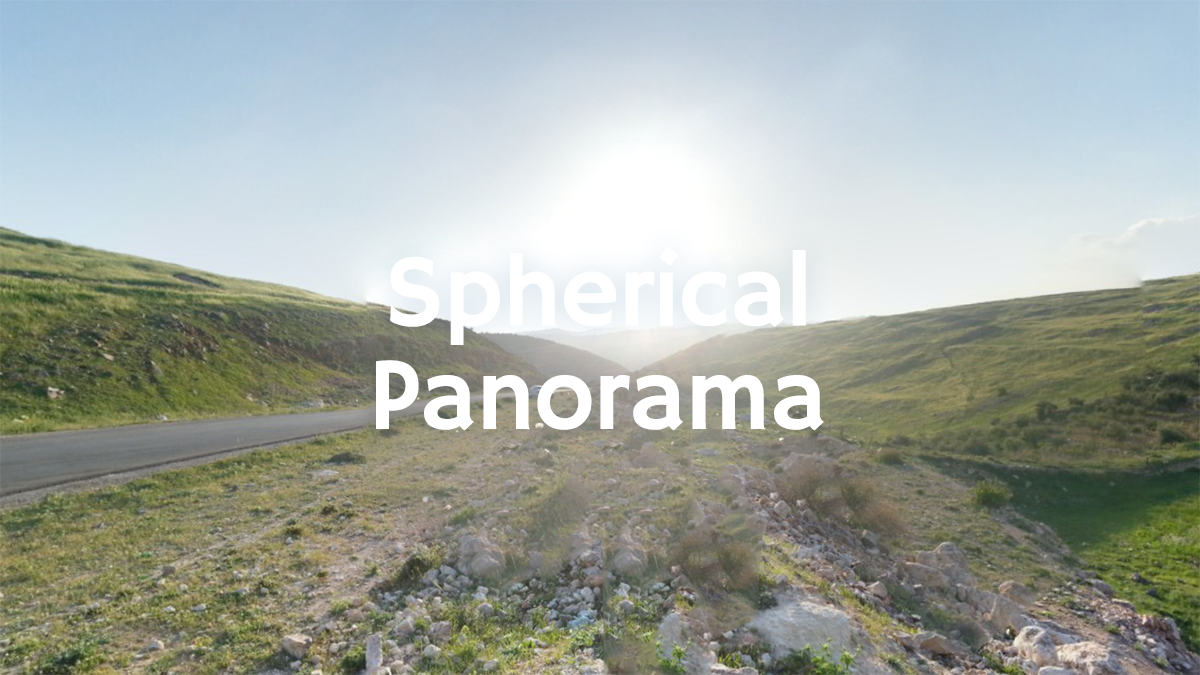
<style>
.page{position:relative;width:1200px;height:675px}
.page>*{position:absolute;margin:0}
.t1{font:103.5px/103.5px "HammersmithOne-Regular";color:#ffffff}
</style>
<div class="page">
<p class="t1" style="left:376px;top:246px;width:448px;height:185px;text-align:center">Spherical<br>Panorama</p>
</div>
